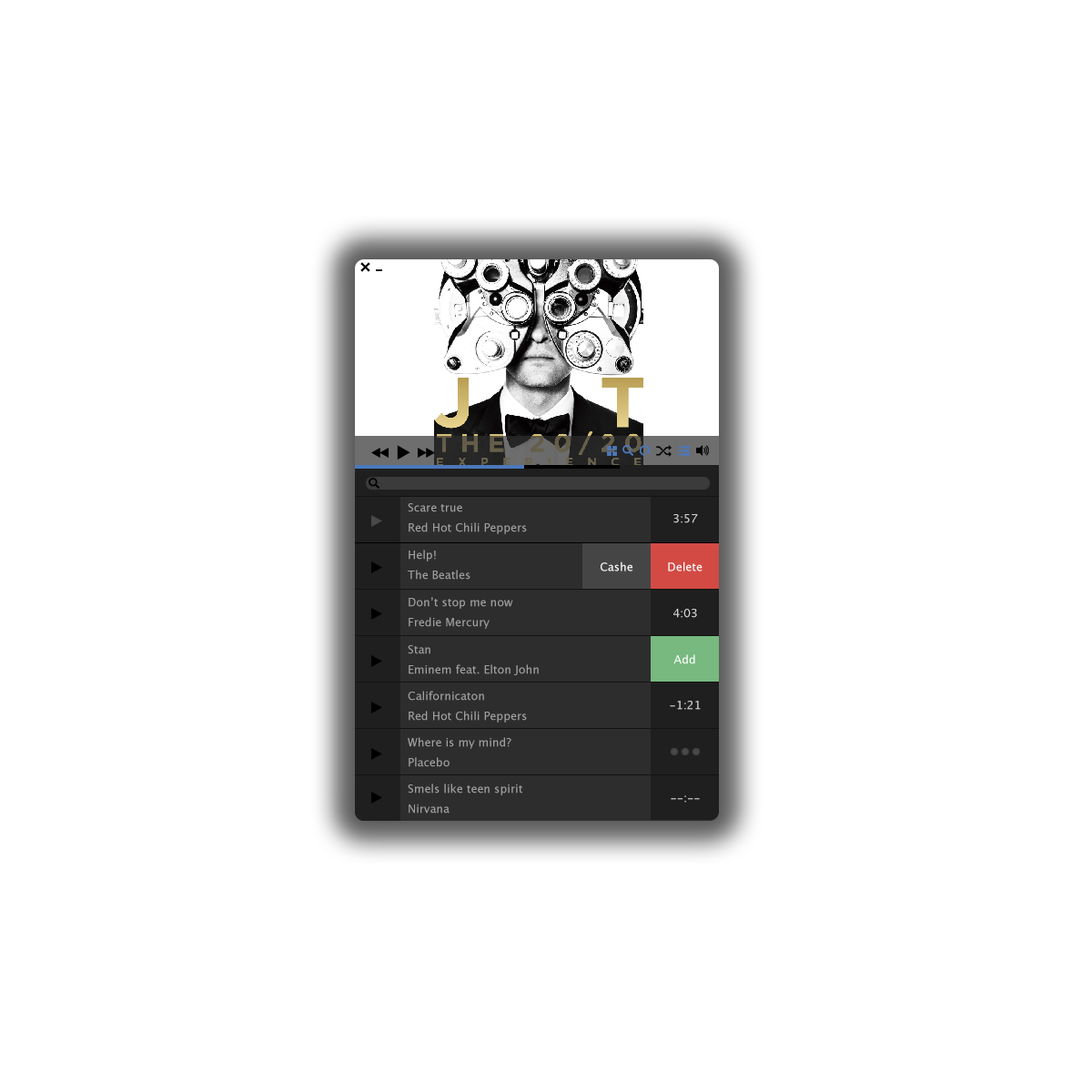
<style>
.page{position:relative;width:1092px;height:1092px;background:#ffffff}
.page>*{position:absolute;margin:0}
.t1{font:11.4px "LucidaGrande";color:#9f9f9f}
.t2{font:11.4px "LucidaGrande";color:#d2d2d2}
.t3{font:11.4px "LucidaGrande";color:#ffffff}
.t4{font:11.4px "LucidaGrande"}
</style>
<div class="page">
<p class="t1" style="left:408px;top:503px;width:54px;height:9px">Scare true</p>
<p class="t2" style="left:673px;top:514px;width:25px;height:9px">3:57</p>
<p class="t1" style="left:409px;top:522px;width:118px;height:12px">Red Hot Chili Peppers</p>
<p class="t1" style="left:409px;top:550px;width:27px;height:11px">Help!</p>
<p class="t1" style="left:408px;top:570px;width:62px;height:10px">The Beatles</p>
<p class="t3" style="left:601px;top:561px;width:31px;height:10px">Cashe</p>
<p class="t3" style="left:668px;top:561px;width:35px;height:10px">Delete</p>
<p class="t1" style="left:409px;top:597px;width:104px;height:12px">Don’t stop me now</p>
<p class="t1" style="left:409px;top:617px;width:81px;height:12px">Fredie Mercury</p>
<p class="t2" style="left:673px;top:609px;width:24px;height:9px">4:03</p>
<p class="t1" style="left:408px;top:645px;width:22px;height:9px">Stan</p>
<p class="t1" style="left:409px;top:664px;width:130px;height:11px">Eminem feat. Elton John</p>
<p class="t3" style="left:673px;top:654px;width:22px;height:10px">Add</p>
<p class="t1" style="left:408px;top:691px;width:76px;height:10px">Californicaton</p>
<p class="t2" style="left:670px;top:701px;width:31px;height:9px">-1:21</p>
<p class="t1" style="left:409px;top:711px;width:118px;height:12px">Red Hot Chili Peppers</p>
<p class="t1" style="left:408px;top:737px;width:103px;height:12px">Where is my mind?</p>
<p class="t1" style="left:409px;top:757px;width:41px;height:10px">Placebo</p>
<p class="t1" style="left:408px;top:783px;width:114px;height:12px">Smels like teen spirit</p>
<p class="t4" style="left:671px;top:795px;width:29px;height:8px">--:--</p>
<p class="t1" style="left:409px;top:804px;width:41px;height:10px">Nirvana</p>
</div>
